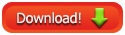
<style>
.page{position:relative;width:125px;height:35px}
.page>*{position:absolute;margin:0}
.t1{font:14px "Tahoma";color:#ebebeb}
</style>
<div class="page">
<p class="t1" style="left:17px;top:12px;width:64px;height:12px">Download!</p>
</div>
